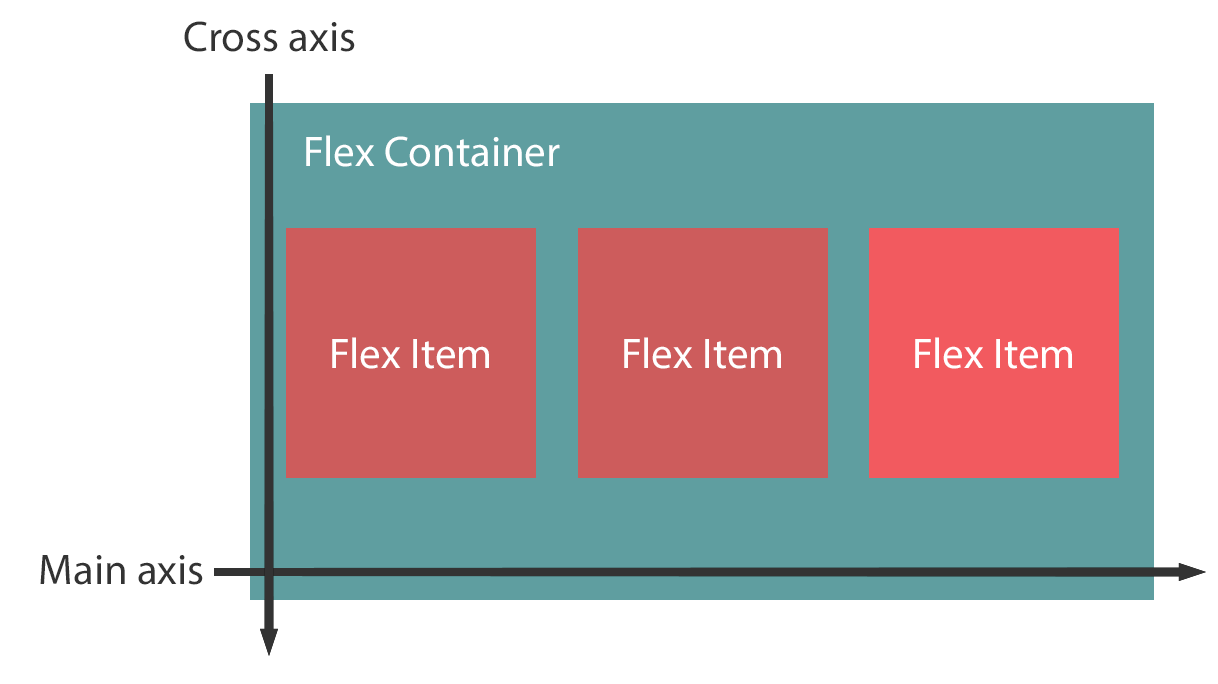
<style>
.page{position:relative;width:1218px;height:684px;background:#ffffff}
.page>*{position:absolute;margin:0}
.t1{font:43px "MyriadPro-Regular";color:#333333}
.t2{font:43px "MyriadPro-Regular";color:#ffffff}
</style>
<div class="page">
<p class="t1" style="left:184px;top:21px;width:171px;height:31px">Cross axis</p>
<p class="t2" style="left:306px;top:135px;width:254px;height:32px">Flex Container</p>
<p class="t2" style="left:332px;top:337px;width:157px;height:32px">Flex Item</p>
<p class="t2" style="left:624px;top:337px;width:157px;height:32px">Flex Item</p>
<p class="t2" style="left:915px;top:337px;width:157px;height:32px">Flex Item</p>
<p class="t1" style="left:40px;top:555px;width:163px;height:30px">Main axis</p>
</div>
